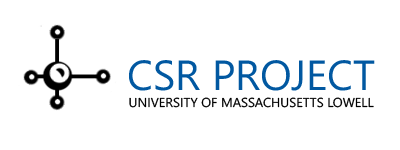
<style>
.page{position:relative;width:400px;height:150px;background:#ffffff}
.page>*{position:absolute;margin:0}
.t1{font:41.9px "SegoeUI";color:#0158a1}
.t2{font:13px "SegoeUI";color:#000000}
</style>
<div class="page">
<p class="t1" style="left:129px;top:60px;width:246px;height:31px">CSR PROJECT</p>
<p class="t2" style="left:129px;top:97px;width:245px;height:11px">UNIVERSITY OF MASSACHUSETTS LOWELL</p>
</div>
